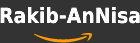
<style>
.page{position:relative;width:140px;height:43px;background:#333333}
.page>*{position:absolute;margin:0}
.t1{font:21px "DejaVuSansCondensed-Bold";color:#fefefe}
</style>
<div class="page">
<p class="t1" style="left:0px;top:7px;width:140px;height:17px">Rakib-AnNisa</p>
</div>
